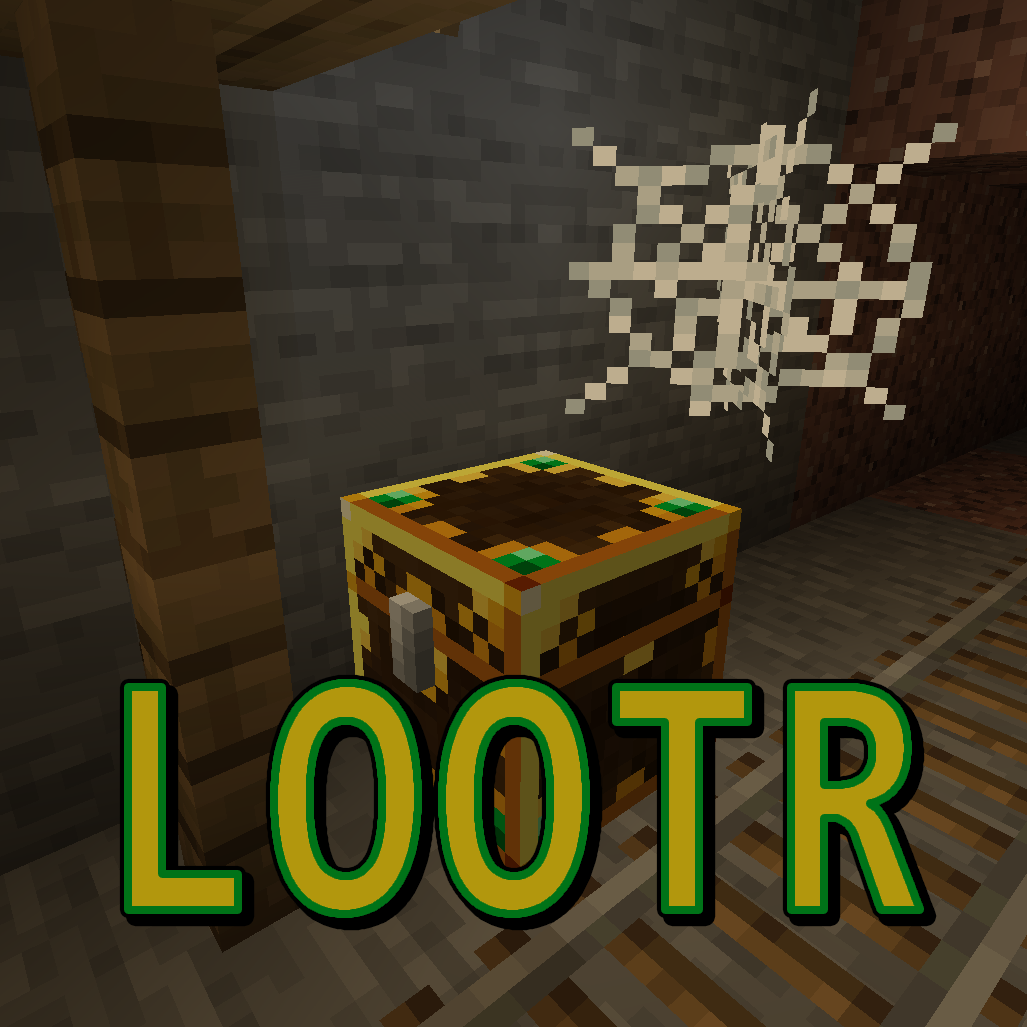
<style>
.page{position:relative;width:1027px;height:1027px}
.page>*{position:absolute;margin:0}
.t1{font:350px "Consolas-Bold";letter-spacing:0.05em;color:#b2970d;scale:0.8 1}
</style>
<div class="page">
<p class="t1" style="left:128px;top:683px;width:792px;height:231px">LOOTR</p>
</div>
